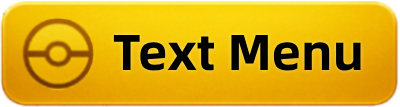
<style>
.page{position:relative;width:400px;height:107px}
.page>*{position:absolute;margin:0}
.t1{font:50.3px "AlibabaPuHuiTi-Bold";color:#010101}
</style>
<div class="page">
<p class="t1" style="left:113px;top:35px;width:248px;height:36px">Text Menu</p>
</div>
